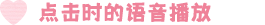
<style>
.page{position:relative;width:265px;height:25px;background:#ffffff}
.page>*{position:absolute;margin:0}
.t1{font:21.2px "shetumodengxiaofangti";color:#ef8299;font-weight:bold}
</style>
<div class="page">
<p class="t1" style="left:39px;top:2px;width:172px;height:20px">点击时的语音播放</p>
</div>
